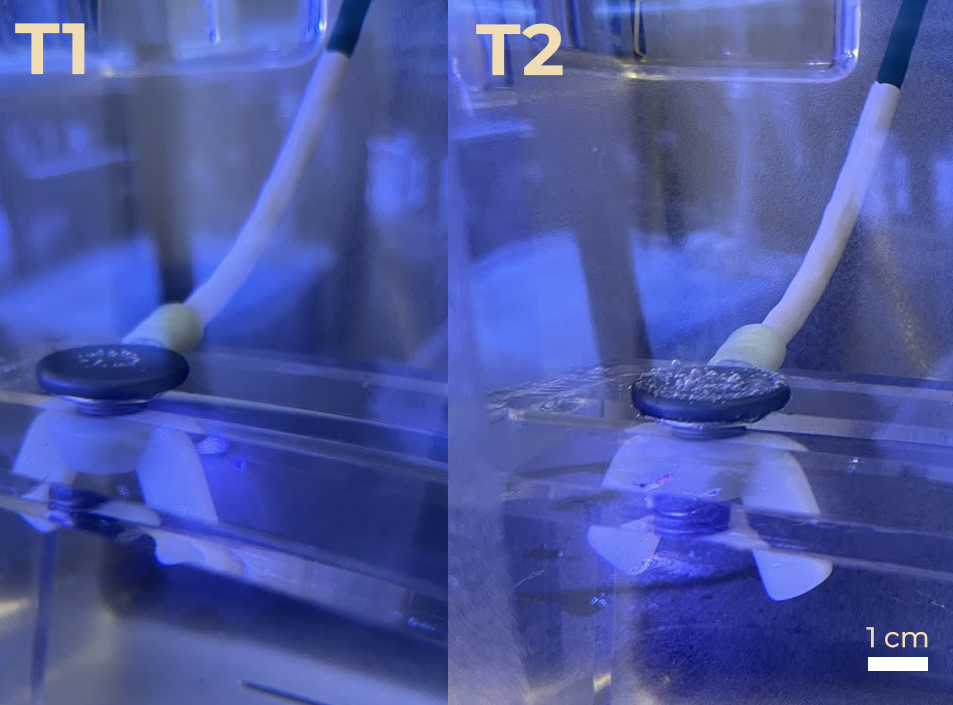
<style>
.page{position:relative;width:953px;height:705px}
.page>*{position:absolute;margin:0}
.t1{font:72px "MontserratRoman-Bold";color:#f0ddb3}
.t2{font:28px "MontserratRoman-Regular";color:#f0ddb3}
</style>
<div class="page">
<p class="t1" style="left:15px;top:23px;width:70px;height:52px">T1</p>
<p class="t1" style="left:476px;top:23px;width:87px;height:53px">T2</p>
<p class="t2" style="left:866px;top:627px;width:62px;height:21px">1 cm</p>
</div>
